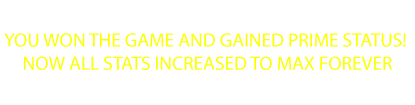
<style>
.page{position:relative;width:415px;height:105px;background:#ffffff}
.page>*{position:absolute;margin:0}
.t1{font:19.4px "MyriadPro-Regular";color:#fcff00}
</style>
<div class="page">
<p class="t1" style="left:4px;top:33px;width:402px;height:37px;text-align:center">YOU WON THE GAME AND GAINED PRIME STATUS! <br>NOW ALL STATS INCREASED TO MAX FOREVER</p>
</div>
